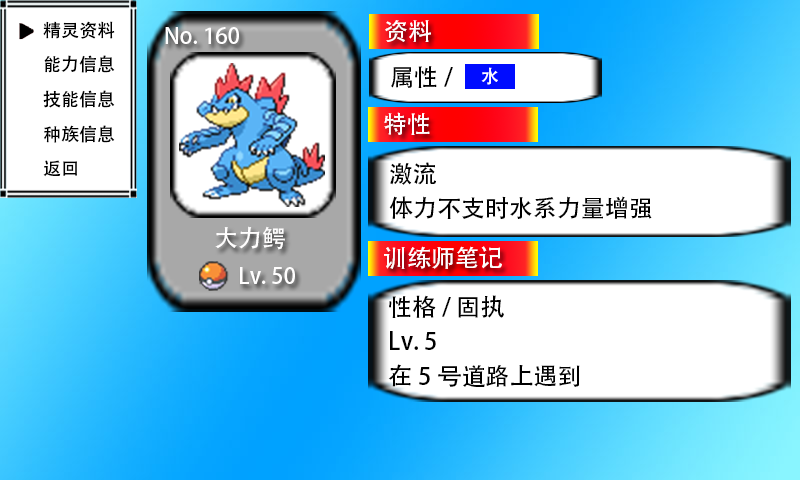
<style>
.page{position:relative;width:800px;height:480px;background:#ffffff}
.page>*{position:absolute;margin:0}
.t1{font:18px "AdobeHeitiStd-Regular";color:#000000}
.t2{font:22px "AdobeHeitiStd-Regular";color:#fffefe}
.t3{font:24px "AdobeHeitiStd-Regular";color:#fffefe}
.t4{font:24px "AdobeHeitiStd-Regular";color:#000000}
</style>
<div class="page">
<p class="t1" style="left:43px;top:21px;width:72px;height:18px">精灵资料</p>
<p class="t2" style="left:165px;top:27px;width:74px;height:17px">No. 160</p>
<p class="t3" style="left:385px;top:20px;width:46px;height:22px">资料</p>
<p class="t1" style="left:44px;top:55px;width:71px;height:18px">能力信息</p>
<p class="t4" style="left:391px;top:66px;width:62px;height:22px">属性/</p>
<p class="t1" style="left:43px;top:90px;width:72px;height:18px">技能信息</p>
<p class="t3" style="left:384px;top:112px;width:46px;height:23px">特性</p>
<p class="t1" style="left:44px;top:125px;width:71px;height:18px">种族信息</p>
<p class="t1" style="left:43px;top:160px;width:34px;height:17px">返回</p>
<p class="t4" style="left:390px;top:162px;width:46px;height:23px">激流</p>
<p class="t4" style="left:389px;top:196px;width:263px;height:23px">体力不支时水系力量增强</p>
<p class="t3" style="left:215px;top:226px;width:70px;height:24px">大力鳄</p>
<p class="t3" style="left:384px;top:246px;width:118px;height:23px">训练师笔记</p>
<p class="t2" style="left:240px;top:267px;width:55px;height:17px">Lv. 50</p>
<p class="t4" style="left:389px;top:295px;width:115px;height:23px">性格/ 固执</p>
<p class="t4" style="left:390px;top:331px;width:46px;height:19px">Lv. 5</p>
<p class="t4" style="left:388px;top:364px;width:192px;height:23px">在5号道路上遇到</p>
</div>
